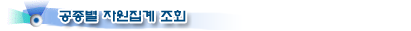
<style>
.page{position:relative;width:411px;height:31px;background:#ffffff}
.page>*{position:absolute;margin:0}
.t1{font:13px "ExpoM-HM";color:#004a80}
</style>
<div class="page">
<p class="t1" style="left:59px;top:10px;width:127px;height:12px">공종별 자원집계 조회</p>
</div>
